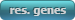
<style>
.page{position:relative;width:75px;height:20px}
.page>*{position:absolute;margin:0}
.t1{font:11px "Tahoma-Bold";color:#d1d2d4}
</style>
<div class="page">
<p class="t1" style="left:10px;top:8px;width:56px;height:8px">res. genes</p>
</div>
